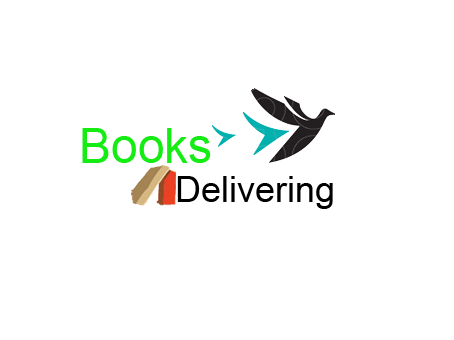
<style>
.page{position:relative;width:454px;height:340px;background:#ffffff}
.page>*{position:absolute;margin:0}
.t1{font:48px "ArialMT";color:#14ec14}
.t2{font:36px "ArialMT";color:#000000}
</style>
<div class="page">
<p class="t1" style="left:82px;top:128px;width:129px;height:35px">Books</p>
<p class="t2" style="left:177px;top:176px;width:156px;height:33px">Delivering</p>
</div>
